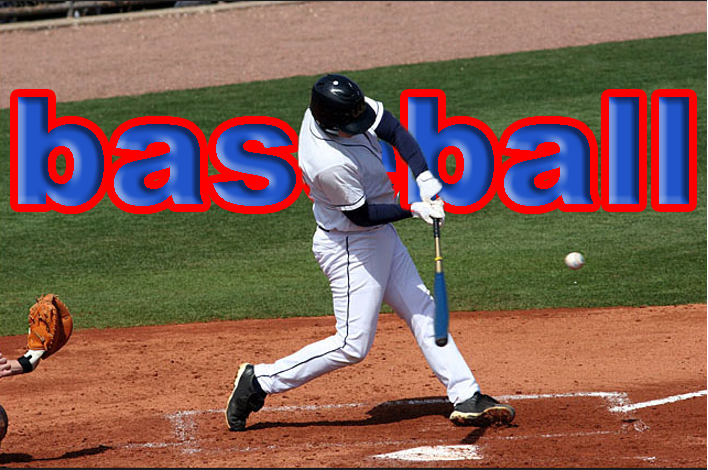
<style>
.page{position:relative;width:708px;height:470px}
.page>*{position:absolute;margin:0}
.t1{font:150px "Arial-Black"}
</style>
<div class="page">
<p class="t1" style="left:18px;top:97px;width:671px;height:109px">baseball</p>
</div>
